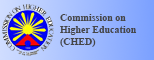
<style>
.page{position:relative;width:154px;height:60px}
.page>*{position:absolute;margin:0}
.t1{font:10px "TimesNewRomanPS-BoldMT";color:#454545}
</style>
<div class="page">
<p class="t1" style="left:60px;top:14px;width:77px;height:33px;text-align:right">Commission on<br> Higher Education<br>(CHED)</p>
</div>
